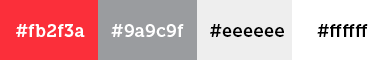
<style>
.page{position:relative;width:392px;height:60px;background:#ffffff}
.page>*{position:absolute;margin:0}
.t1{font:18px "Museo700-Regular";letter-spacing:0.025em;color:#ffffff}
.t2{font:18px "Museo700-Regular";letter-spacing:0.025em;color:#010101}
</style>
<div class="page">
<p class="t1" style="left:16px;top:24px;width:69px;height:13px">#fb2f3a</p>
<p class="t1" style="left:111px;top:24px;width:73px;height:13px">#9a9c9f</p>
<p class="t2" style="left:210px;top:24px;width:74px;height:13px">#eeeeee</p>
<p class="t2" style="left:317px;top:24px;width:51px;height:13px">#ffffff</p>
</div>
